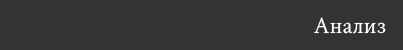
<style>
.page{position:relative;width:403px;height:50px;background:#333333}
.page>*{position:absolute;margin:0}
.t1{font:24px "CrimsonText-Regular";color:#ffffff}
</style>
<div class="page">
<p class="t1" style="left:314px;top:17px;width:72px;height:17px">Анализ</p>
</div>
